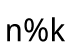
<style>
.page{position:relative;width:70px;height:55px;background:#ffffff}
.page>*{position:absolute;margin:0}
.t1{font:31.8px "DroidSans";color:#000000}
</style>
<div class="page">
<p class="t1" style="left:7px;top:17px;width:58px;height:25px">n%k</p>
</div>
